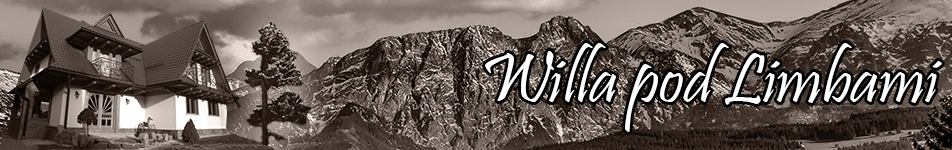
<style>
.page{position:relative;width:952px;height:150px}
.page>*{position:absolute;margin:0}
.t1{font:70.9px "Pristina-Regular";color:#ffffff}
</style>
<div class="page">
<p class="t1" style="left:485px;top:43px;width:457px;height:89px">Willa pod Limbami</p>
</div>
